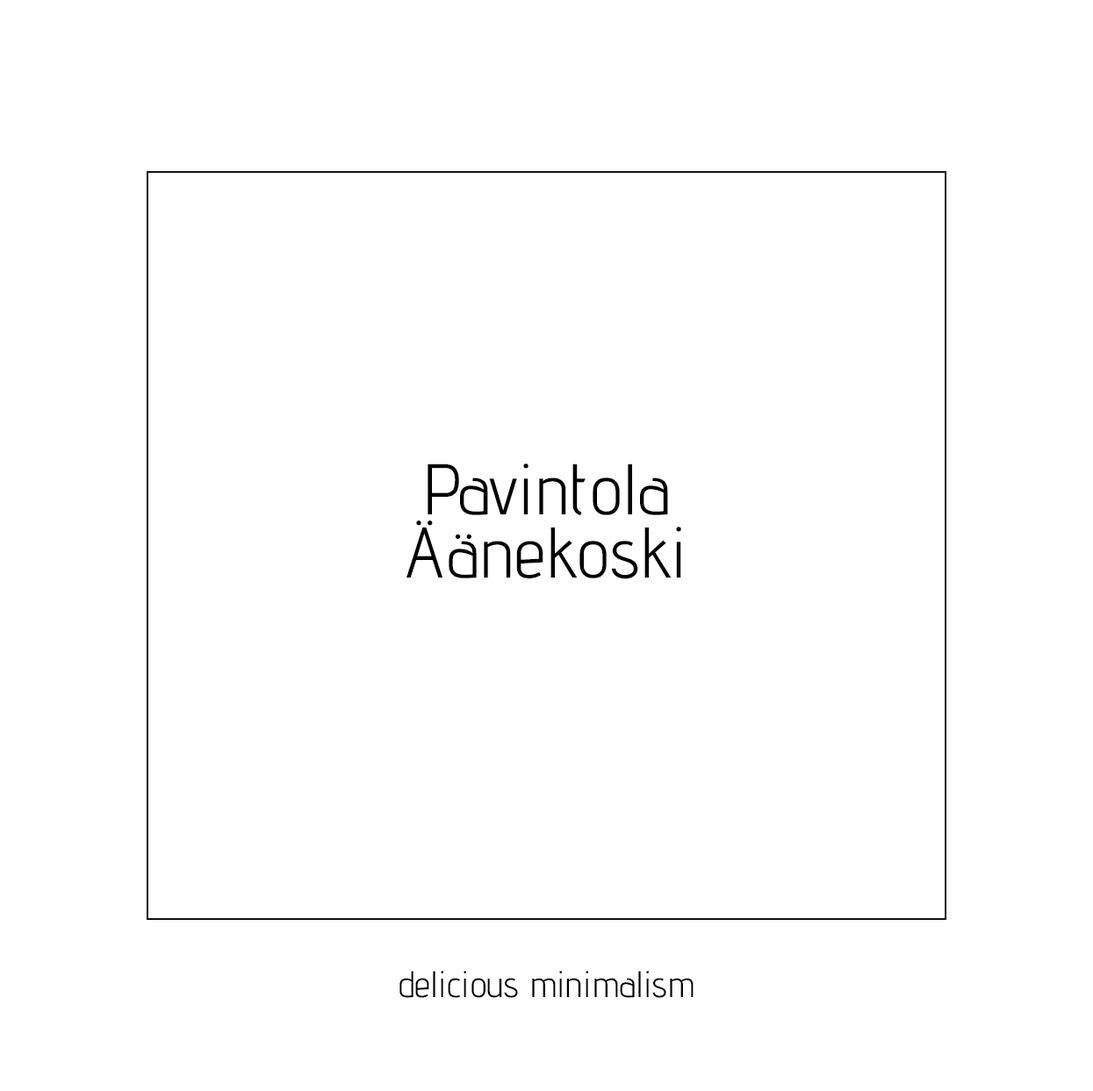
<style>
.page{position:relative;width:1093px;height:1091px;background:#ffffff}
.page>*{position:absolute;margin:0}
.t1{font:122.9px/63.2px "AdventPro-Regular";color:#000000}
.t2{font:63.2px "AdventPro-Regular";color:#000000}
</style>
<div class="page">
<p class="t1" style="left:406px;top:463px;width:275px;height:116px;text-align:center">Pavintola<br>Äänekoski</p>
<p class="t2" style="left:399px;top:971px;width:294px;height:27px">delicious minimalism</p>
</div>
